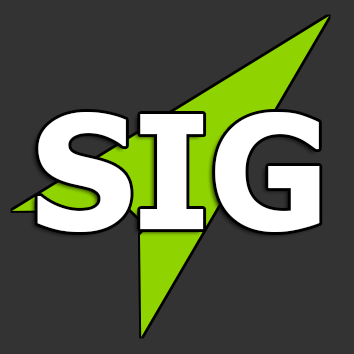
<style>
.page{position:relative;width:354px;height:354px;background:#333333}
.page>*{position:absolute;margin:0}
.t1{font:158.5px "Tahoma-Bold";color:#ffffff}
</style>
<div class="page">
<p class="t1" style="left:37px;top:112px;width:283px;height:120px">SIG</p>
</div>
